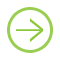
<style>
.page{position:relative;width:60px;height:60px;background:#ffffff}
.page>*{position:absolute;margin:0}
.t1{font:34.8px "MyriadPro-Regular";color:#8cc739;scale:1.56 1}
.t2{font:43.6px "MyriadPro-Regular";color:#8cc739;scale:0.63 1}
</style>
<div class="page">
<p class="t1" style="left:16px;top:29px;width:27px;height:2px">_</p>
<p class="t2" style="left:30px;top:18px;width:13px;height:24px">&gt;</p>
</div>
